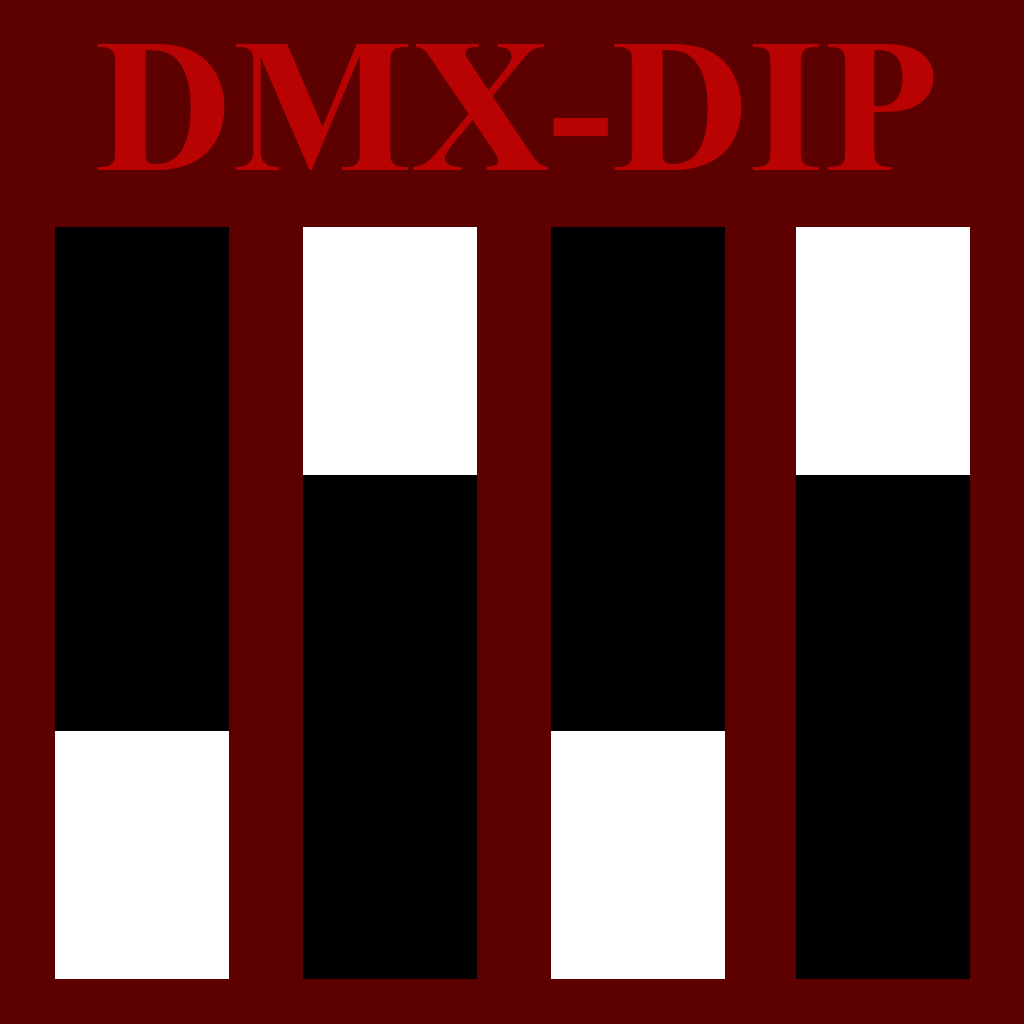
<style>
.page{position:relative;width:1024px;height:1024px;background:#5c0000}
.page>*{position:absolute;margin:0}
.t1{font:190px "TimesNewRomanPS-BoldMT";color:#b90202}
</style>
<div class="page">
<p class="t1" style="left:97px;top:44px;width:837px;height:126px">DMX-DIP</p>
</div>
